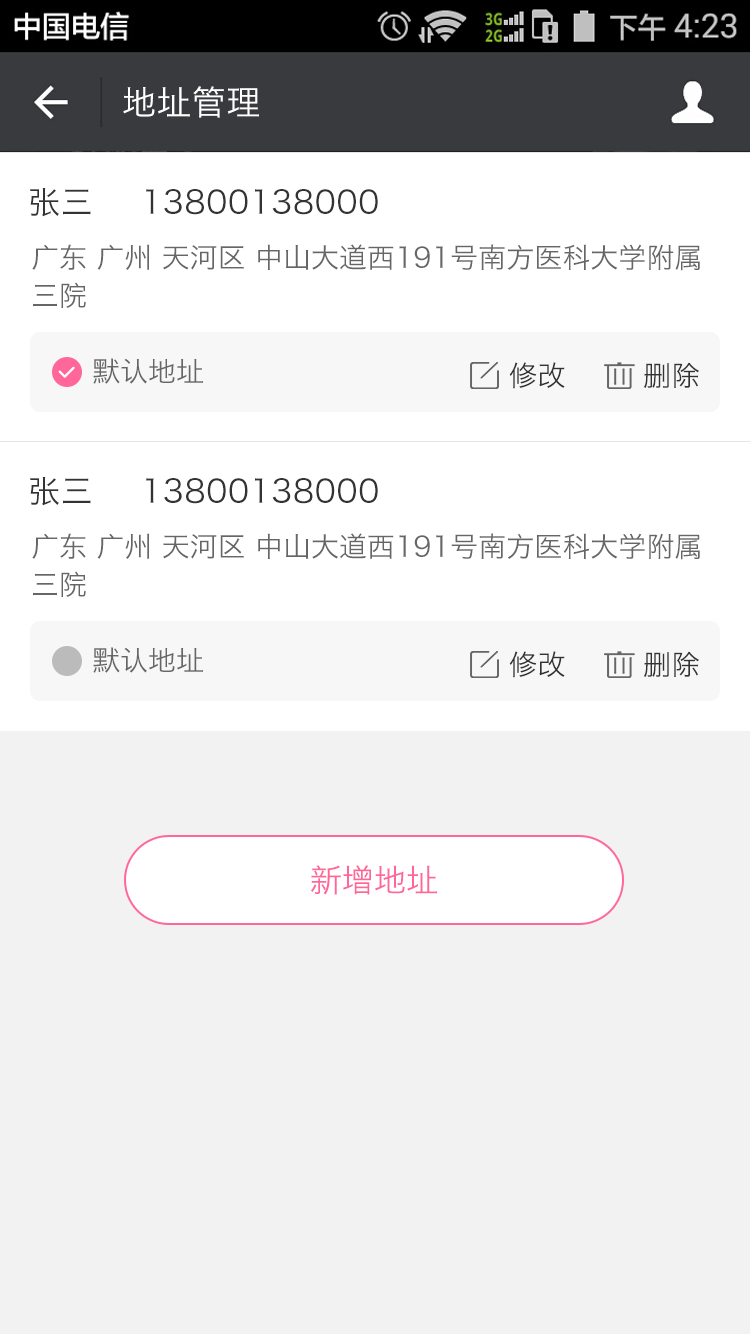
<style>
.page{position:relative;width:750px;height:1334px;background:#f2f2f2}
.page>*{position:absolute;margin:0}
.t1{font:34px "HiraginoSansGB-W3";letter-spacing:0.022em;color:#ffffff}
.t2{font:32px "HiraginoSansGB-W3";letter-spacing:0.022em;color:#333333}
.t3{font:28px/36px "HiraginoSansGB-W3";color:#666666}
.t4{font:28px "HiraginoSansGB-W3";color:#666666}
.t5{font:28px "HiraginoSansGB-W3";letter-spacing:0.02em;color:#333333}
.t6{font:32px "HiraginoSansGB-W3";color:#ff6699}
</style>
<div class="page">
<p class="t1" style="left:123px;top:86px;width:136px;height:32px">地址管理</p>
<p class="t2" style="left:30px;top:188px;width:61px;height:29px">张三</p>
<p class="t2" style="left:146px;top:189px;width:232px;height:26px">13800138000</p>
<p class="t3" style="left:32px;top:244px;width:668px;height:64px">广东 广州 天河区 中山大道西191号南方医科大学附属<br>三院</p>
<p class="t4" style="left:93px;top:358px;width:110px;height:26px">默认地址</p>
<p class="t5" style="left:509px;top:362px;width:56px;height:27px">修改</p>
<p class="t5" style="left:643px;top:362px;width:56px;height:26px">删除</p>
<p class="t2" style="left:30px;top:477px;width:61px;height:29px">张三</p>
<p class="t2" style="left:146px;top:478px;width:232px;height:26px">13800138000</p>
<p class="t3" style="left:32px;top:533px;width:668px;height:64px">广东 广州 天河区 中山大道西191号南方医科大学附属<br>三院</p>
<p class="t4" style="left:93px;top:647px;width:110px;height:26px">默认地址</p>
<p class="t5" style="left:509px;top:651px;width:56px;height:27px">修改</p>
<p class="t5" style="left:643px;top:651px;width:56px;height:26px">删除</p>
<p class="t6" style="left:310px;top:865px;width:127px;height:30px">新增地址</p>
</div>
